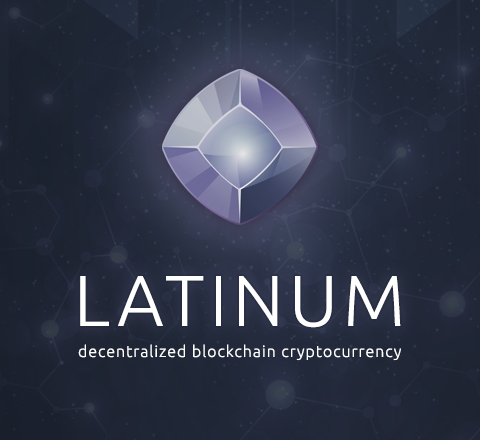
<style>
.page{position:relative;width:480px;height:440px}
.page>*{position:absolute;margin:0}
.t1{font:72px "Ubuntu-Light";letter-spacing:0.072em;color:#ffffff}
.t2{font:16px "Ubuntu-Light";letter-spacing:0.06em;color:#ffffff}
</style>
<div class="page">
<p class="t1" style="left:80px;top:276px;width:321px;height:52px">LATINUM</p>
<p class="t2" style="left:78px;top:344px;width:323px;height:17px">decentralized blockchain cryptocurrency</p>
</div>
